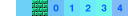
<style>
.page{position:relative;width:128px;height:16px}
.page>*{position:absolute;margin:0}
.t1{font:10px "Helvetica-Bold";color:#0063f8}
</style>
<div class="page">
<p class="t1" style="left:53px;top:4px;width:6px;height:8px">0</p>
<p class="t1" style="left:69px;top:4px;width:4px;height:8px">1</p>
<p class="t1" style="left:85px;top:4px;width:6px;height:8px">2</p>
<p class="t1" style="left:101px;top:4px;width:6px;height:8px">3</p>
<p class="t1" style="left:117px;top:4px;width:6px;height:8px">4</p>
</div>
